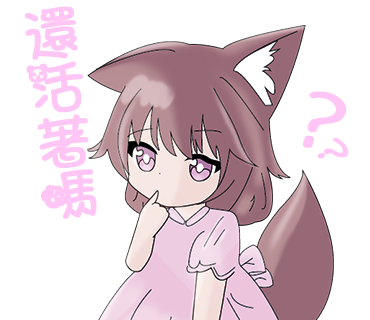
<style>
.page{position:relative;width:370px;height:320px;background:#ffffff}
.page>*{position:absolute;margin:0}
.t1{font:60px/54px "ARTianniuB5-Bold";color:#ffc6f5;font-weight:bold}
.t2{font:79.2px "ARTianniuB5-Bold";color:#ffc6f5;font-weight:bold;scale:1.19 1}
.t3{font:36.9px "ARTianniuB5-Bold";color:#ffc6f5;font-weight:bold;scale:1.42 1}
</style>
<div class="page">
<p class="t1" style="left:24px;top:6px;width:73px;height:213px;rotate:-7deg">還<br>活<br>著<br>嗎</p>
<p class="t2" style="left:302px;top:91px;width:45px;height:57px;rotate:19deg">?</p>
<p class="t3" style="left:317px;top:138px;width:32px;height:21px;rotate:48deg">?</p>
</div>
